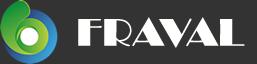
<style>
.page{position:relative;width:257px;height:64px;background:#333333}
.page>*{position:absolute;margin:0}
.t1{font:40px "Broadway";color:#fffffe}
</style>
<div class="page">
<p class="t1" style="left:78px;top:17px;width:167px;height:31px">FRAVAL</p>
</div>
